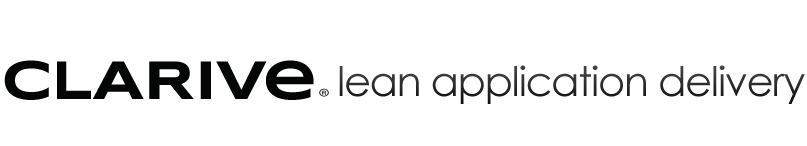
<style>
.page{position:relative;width:807px;height:146px;background:#ffffff}
.page>*{position:absolute;margin:0}
.t1{font:56.1px "Syncopate-Bold";letter-spacing:-0.01em;color:#040505}
.t2{font:56.1px "Syncopate-Bold";letter-spacing:-0.01em;color:#040505;scale:0.9 1}
.t3{font:56.1px "Syncopate-Bold";letter-spacing:-0.075em;color:#040505}
.t4{font:40.8px "CenturyGothic";letter-spacing:-0.025em;color:#2c2b2c}
.t5{font:24.1px "MyriadPro-Light";letter-spacing:-0.05em;scale:1.22 1}
</style>
<div class="page">
<p class="t1" style="left:4px;top:60px;width:310px;height:40px">C<span class="t2">L</span>ARI<span class="t3">Ve</span></p>
<p class="t4" style="left:339px;top:65px;width:466px;height:39px">lean application delivery</p>
<p class="t5" style="left:319px;top:88px;width:10px;height:9px">®</p>
</div>
